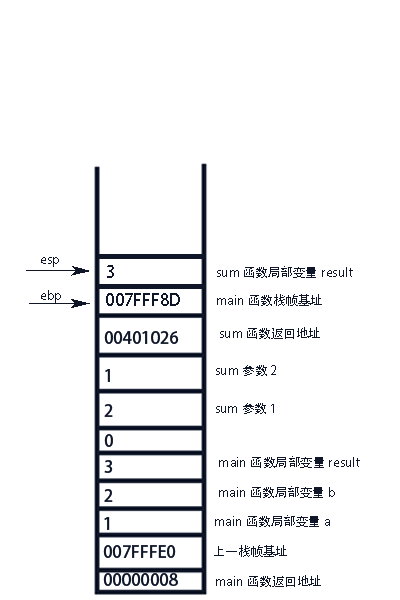
<style>
.page{position:relative;width:400px;height:600px;background:#ffffff}
.page>*{position:absolute;margin:0}
.t1{font:12.5px "AdobeHeitiStd-Regular";color:#0e1627}
.t2{font:16.7px "AdobeHeitiStd-Regular";color:#0e1627}
</style>
<div class="page">
<p class="t1" style="left:41px;top:257px;width:18px;height:10px">esp</p>
<p class="t2" style="left:107px;top:265px;width:7px;height:13px">3</p>
<p class="t1" style="left:217px;top:266px;width:136px;height:12px">sum函数局部变量result</p>
<p class="t1" style="left:41px;top:290px;width:20px;height:13px">ebp</p>
<p class="t2" style="left:106px;top:293px;width:74px;height:13px">007FFF8D</p>
<p class="t1" style="left:217px;top:294px;width:105px;height:12px">main函数栈帧基址</p>
<p class="t1" style="left:220px;top:327px;width:100px;height:12px">sum函数返回地址</p>
<p class="t2" style="left:104px;top:331px;width:75px;height:13px">00401026</p>
<p class="t1" style="left:216px;top:365px;width:60px;height:11px">sum参数2</p>
<p class="t2" style="left:105px;top:369px;width:5px;height:13px">1</p>
<p class="t2" style="left:104px;top:404px;width:9px;height:13px">2</p>
<p class="t1" style="left:216px;top:403px;width:58px;height:11px">sum参数1</p>
<p class="t2" style="left:104px;top:434px;width:9px;height:13px">0</p>
<p class="t2" style="left:104px;top:460px;width:9px;height:13px">3</p>
<p class="t1" style="left:219px;top:456px;width:141px;height:12px">main函数局部变量result</p>
<p class="t1" style="left:219px;top:486px;width:116px;height:12px">main函数局部变量b</p>
<p class="t2" style="left:104px;top:489px;width:9px;height:13px">2</p>
<p class="t2" style="left:104px;top:517px;width:6px;height:13px">1</p>
<p class="t1" style="left:215px;top:515px;width:115px;height:12px">main函数局部变量a</p>
<p class="t2" style="left:103px;top:545px;width:73px;height:13px">007FFFE0</p>
<p class="t1" style="left:214px;top:545px;width:73px;height:12px">上一栈帧基址</p>
<p class="t2" style="left:103px;top:573px;width:75px;height:13px">00000008</p>
<p class="t1" style="left:216px;top:575px;width:105px;height:12px">main函数返回地址</p>
</div>
